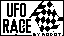
<style>
.page{position:relative;width:64px;height:36px;background:#ffffff}
.page>*{position:absolute;margin:0}
.t1{font:17px/16px "AgencyFB-Reg";color:#000000;font-weight:bold}
.t2{font:17px/16px "AgencyFB-Reg";letter-spacing:0.01em;color:#000000;font-weight:bold}
.t3{font:17px/16px "AgencyFB-Reg";letter-spacing:0.002em;color:#000000;font-weight:bold}
</style>
<div class="page">
<p class="t1" style="left:3px;top:3px;width:28px;height:30px;text-align:center">U<span class="t2">F</span><span class="t3">O<br></span>RACE</p>
</div>
